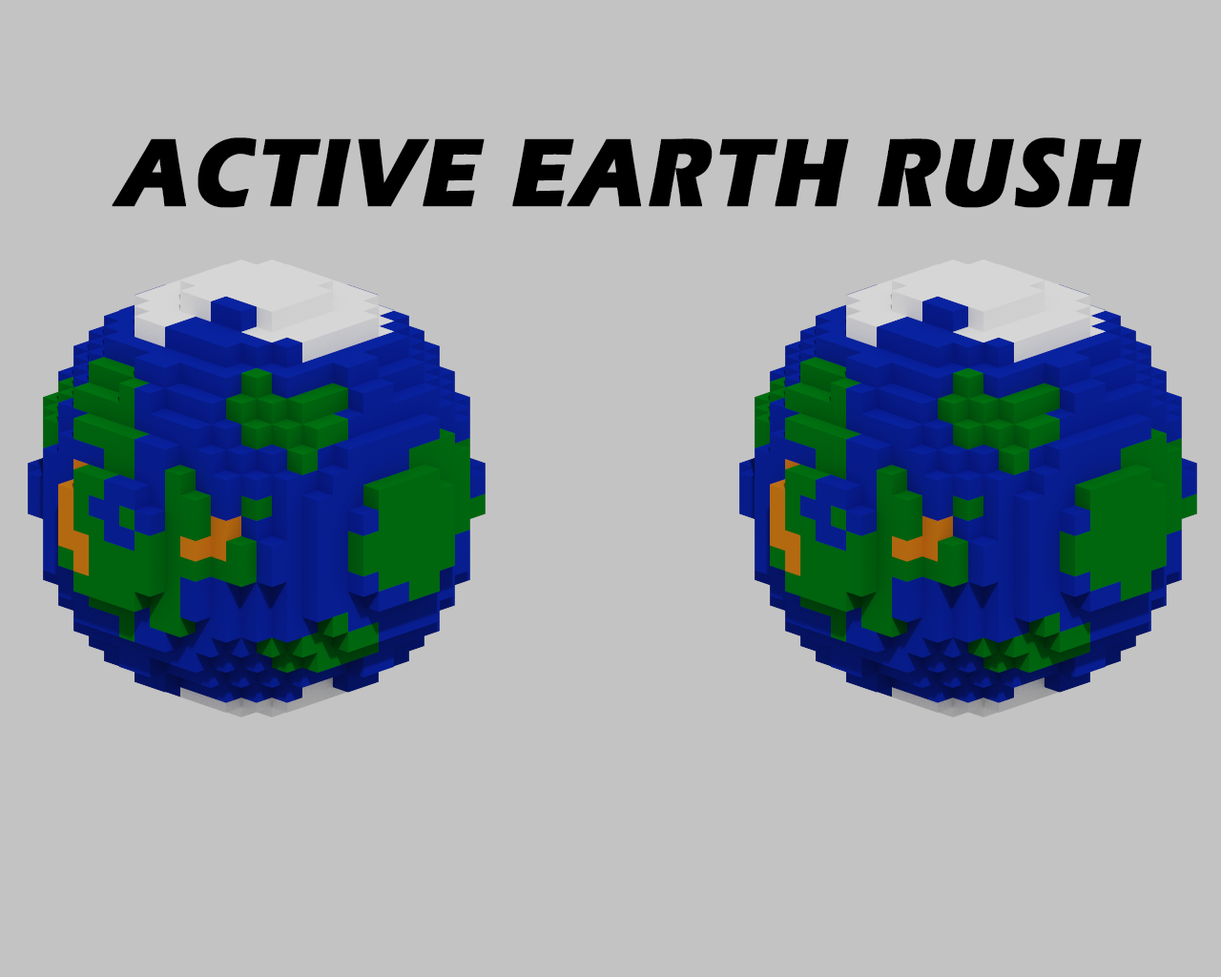
<style>
.page{position:relative;width:1221px;height:977px;background:#c3c3c3}
.page>*{position:absolute;margin:0}
.t1{font:99.2px "ErasITC-Bold";letter-spacing:0.05em;color:#000000;font-weight:bold;font-style:italic;scale:0.85 1}
</style>
<div class="page">
<p class="t1" style="left:112px;top:137px;width:1030px;height:71px">ACTIVE EARTH RUSH</p>
</div>
